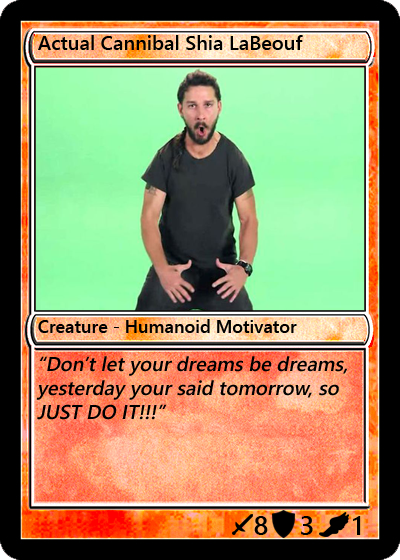
<style>
.page{position:relative;width:400px;height:560px}
.page>*{position:absolute;margin:0}
.t1{font:20px "YuGothicUI-Semibold";color:#000000}
.t2{font:18px "YuGothicUI-Semibold";color:#000000}
.t3{font:20px "YuGothicUI-Semibold";color:#000000;font-style:italic}
.t4{font:27px "YuGothicUI-Semibold";color:#000000}
</style>
<div class="page">
<p class="t1" style="left:38px;top:35px;width:265px;height:15px">Actual Cannibal Shia LaBeouf</p>
<p class="t2" style="left:38px;top:319px;width:259px;height:14px">Creature - Humanoid Motivator</p>
<p class="t3" style="left:36px;top:356px;width:312px;height:64px">“Don’t let your dreams be dreams, yesterday your said tomorrow, so JUST DO IT!!!”</p>
<p class="t4" style="left:254px;top:516px;width:14px;height:19px">8</p>
<p class="t4" style="left:301px;top:516px;width:12px;height:19px">3</p>
<p class="t4" style="left:353px;top:516px;width:8px;height:19px">1</p>
</div>
